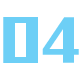
<style>
.page{position:relative;width:80px;height:80px;background:#ffffff}
.page>*{position:absolute;margin:0}
.t1{font:60px "MStiffHeiHK-UltraBold";color:#6dcff6}
</style>
<div class="page">
<p class="t1" style="left:3px;top:17px;width:76px;height:46px">04</p>
</div>
